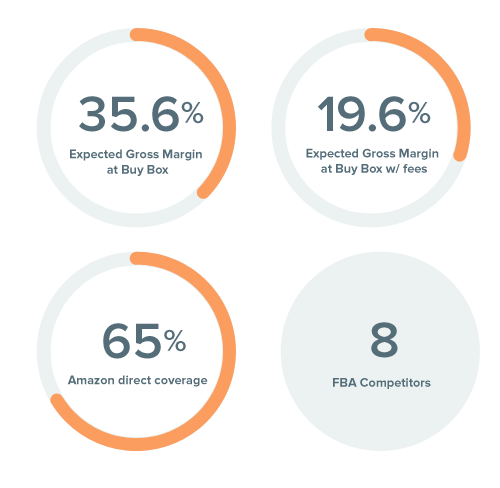
<style>
.page{position:relative;width:500px;height:488px;background:#ffffff}
.page>*{position:absolute;margin:0}
.t1{font:51.5px "ProximaNova-Semibold";color:#546d79}
.t2{font:31.6px "ProximaNova-Semibold";color:#546d79}
.t3{font:12.7px "ProximaNova-Bold";color:#546d79}
</style>
<div class="page">
<p class="t1" style="left:79px;top:96px;width:125px;height:36px">35.6<span class="t2">%</span></p>
<p class="t1" style="left:318px;top:96px;width:113px;height:36px">19.6<span class="t2">%</span></p>
<p class="t3" style="left:70px;top:149px;width:132px;height:27px;text-align:center">Expected Gross Margin <br>at Buy Box</p>
<p class="t3" style="left:306px;top:148px;width:133px;height:27px;text-align:center">Expected Gross Margin <br>at Buy Box w/ fees</p>
<p class="t1" style="left:103px;top:323px;width:83px;height:36px">65<span class="t2">%</span></p>
<p class="t1" style="left:371px;top:322px;width:27px;height:36px">8</p>
<p class="t3" style="left:67px;top:375px;width:141px;height:12px">Amazon direct coverage</p>
<p class="t3" style="left:333px;top:378px;width:98px;height:11px">FBA Competitors</p>
</div>
